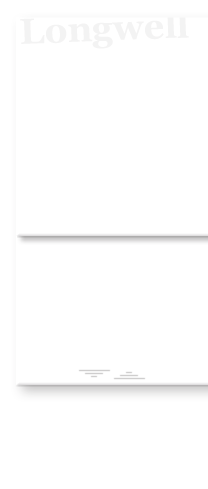
<style>
.page{position:relative;width:208px;height:489px;background:#ffffff}
.page>*{position:absolute;margin:0}
.t1{font:36px "Georgia-Bold";color:#f3f3f3}
</style>
<div class="page">
<p class="t1" style="left:20px;top:10px;width:169px;height:39px;rotate:-2deg">Longwell</p>
</div>
